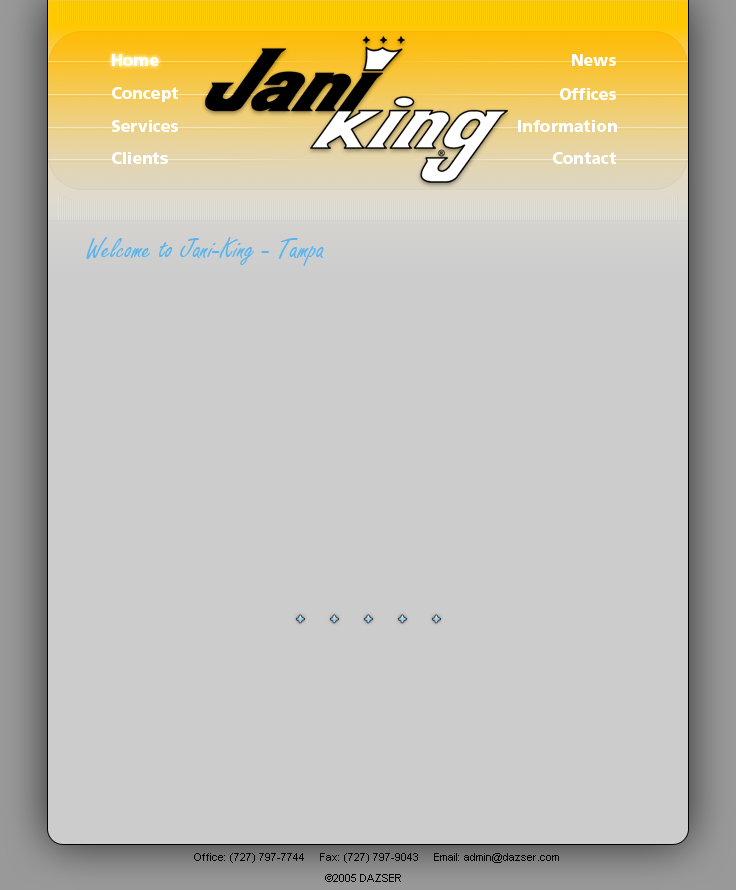
<style>
.page{position:relative;width:736px;height:890px;background:#cccccc}
.page>*{position:absolute;margin:0}
.t1{font:16px "FrutigerLTStd-Black";color:#ffffff}
.t2{font:30px "FreestyleScript-Regular";color:#57b4ef}
.t3{font:11px "ArialMT";color:#010101}
</style>
<div class="page">
<p class="t1" style="left:112px;top:54px;width:47px;height:12px">Home</p>
<p class="t1" style="left:572px;top:54px;width:44px;height:12px">News</p>
<p class="t1" style="left:112px;top:87px;width:66px;height:15px">Concept</p>
<p class="t1" style="left:560px;top:88px;width:56px;height:12px">Offices</p>
<p class="t1" style="left:112px;top:120px;width:66px;height:12px">Services</p>
<p class="t1" style="left:518px;top:120px;width:99px;height:12px">Information</p>
<p class="t1" style="left:112px;top:152px;width:56px;height:12px">Clients</p>
<p class="t1" style="left:553px;top:152px;width:63px;height:12px">Contact</p>
<p class="t2" style="left:86px;top:237px;width:238px;height:29px">Welcome to Jani-King - Tampa</p>
<p class="t3" style="left:194px;top:853px;width:365px;height:10px">Office: (727) 797-7744     Fax: (727) 797-9043     Email: admin@dazser.com</p>
<p class="t3" style="left:325px;top:874px;width:76px;height:8px">©2005 DAZSER</p>
</div>
